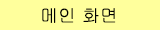
<style>
.page{position:relative;width:160px;height:30px;background:#ffff9c}
.page>*{position:absolute;margin:0}
.t1{font:18px "Gulim";color:#000000}
</style>
<div class="page">
<p class="t1" style="left:42px;top:8px;width:74px;height:15px">메인 화면</p>
</div>
